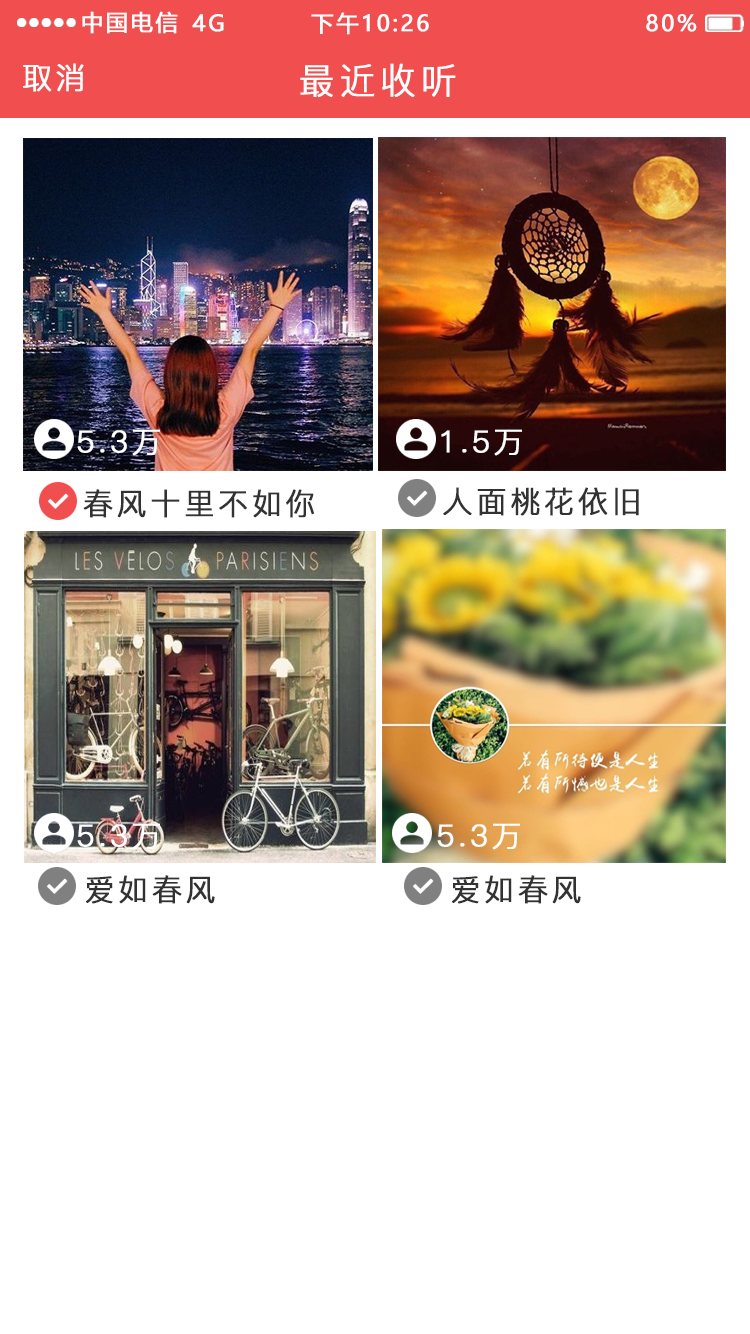
<style>
.page{position:relative;width:750px;height:1334px;background:#ffffff}
.page>*{position:absolute;margin:0}
.t1{font:22px "MicrosoftYaHei";letter-spacing:0.1em;color:#ffffff;text-transform:uppercase;font-weight:bold}
.t2{font:30px "PingFang-SC-Regular";letter-spacing:0.1em;color:#ffffff;text-transform:uppercase;font-weight:bold}
.t3{font:36px "PingFang-SC-Regular";letter-spacing:0.1em;color:#ffffff;text-transform:uppercase;font-weight:bold}
.t4{font:30px "PingFang-SC-Regular";letter-spacing:0.1em;color:#323233;text-transform:uppercase;font-weight:bold}
</style>
<div class="page">
<p class="t1" style="left:82px;top:11px;width:96px;height:23px">中国电信</p>
<p class="t1" style="left:192px;top:14px;width:32px;height:18px">4G</p>
<p class="t1" style="left:311px;top:12px;width:118px;height:23px">下午10:26</p>
<p class="t1" style="left:646px;top:14px;width:51px;height:18px">80%</p>
<p class="t2" style="left:23px;top:63px;width:61px;height:29px">取消</p>
<p class="t3" style="left:300px;top:63px;width:156px;height:34px">最近收听</p>
<p class="t2" style="left:77px;top:429px;width:83px;height:27px">5.3万</p>
<p class="t2" style="left:441px;top:429px;width:81px;height:27px">1.5万</p>
<p class="t4" style="left:83px;top:489px;width:231px;height:29px">春风十里不如你</p>
<p class="t4" style="left:443px;top:487px;width:196px;height:29px">人面桃花依旧</p>
<p class="t2" style="left:77px;top:823px;width:83px;height:27px">5.3万</p>
<p class="t2" style="left:437px;top:823px;width:83px;height:27px">5.3万</p>
<p class="t4" style="left:86px;top:875px;width:129px;height:29px">爱如春风</p>
<p class="t4" style="left:452px;top:875px;width:129px;height:29px">爱如春风</p>
</div>
